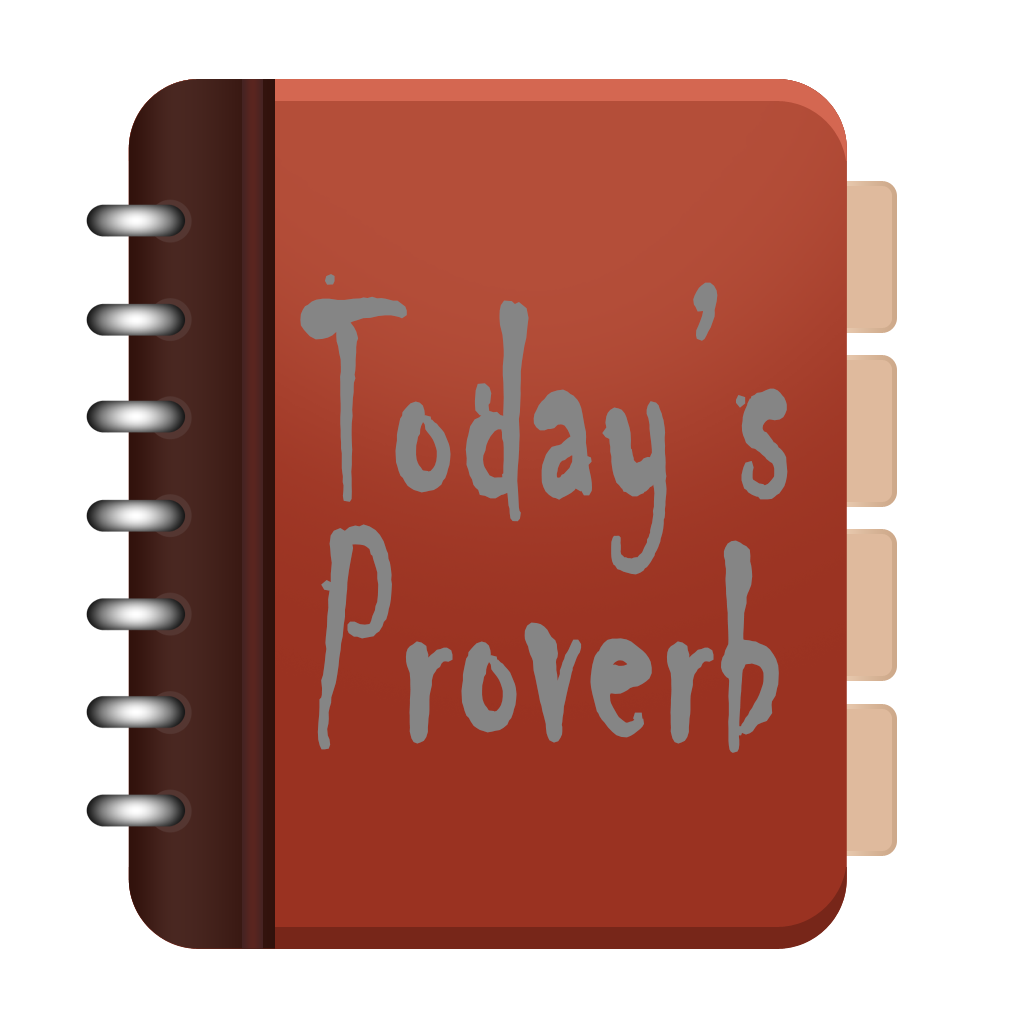
<style>
.page{position:relative;width:1024px;height:1024px;background:#ffffff}
.page>*{position:absolute;margin:0}
.t1{font:305.9px/24px "Chiller-Regular";letter-spacing:0.025em;color:#858585;font-weight:bold;scale:0.62 1}
</style>
<div class="page">
<p class="t1" style="left:300px;top:274px;width:488px;height:479px;text-align:center">Today’s<br><br><br><br><br><br><br><br><br><br>Proverb</p>
</div>
